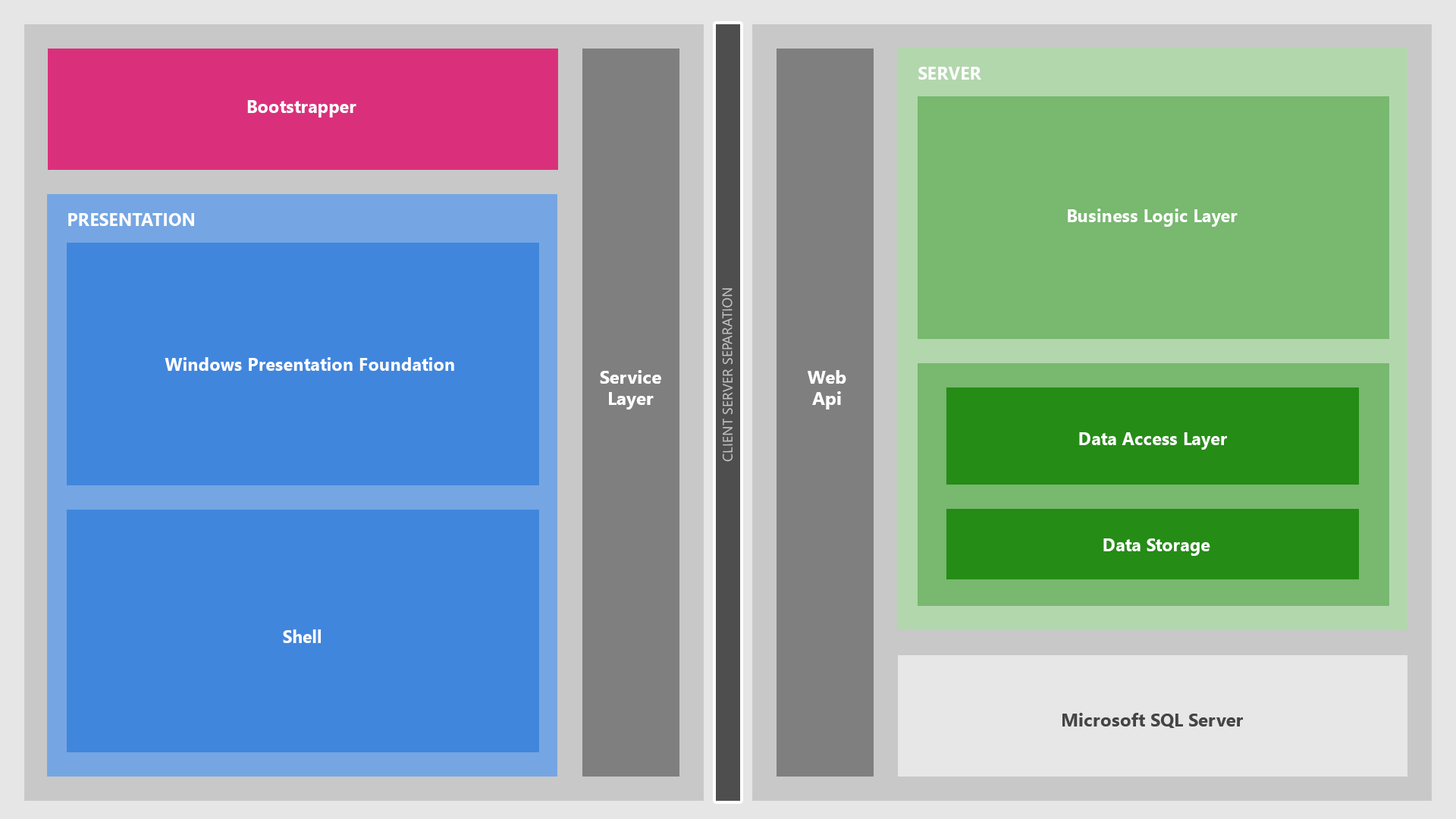
<style>
.page{position:relative;width:1456px;height:819px}
.page>*{position:absolute;margin:0}
.t1{font:18.2px "SegoeUI-Bold";color:#ffffff;text-transform:uppercase;scale:0.97 1}
.t2{font:18.2px "SegoeUI-Bold";color:#ffffff;scale:0.97 1}
.t3{font:13.6px "SegoeUI";color:#c1c1c1;text-transform:uppercase}
.t4{font:18.2px "SegoeUI-Bold";color:#ffffff}
.t5{font:18.2px "SegoeUI-Bold";color:#454545}
</style>
<div class="page">
<p class="t1" style="left:918px;top:67px;width:63px;height:13px">SERVER</p>
<p class="t2" style="left:247px;top:100px;width:109px;height:18px">Bootstrapper</p>
<p class="t2" style="left:1068px;top:209px;width:170px;height:18px">Business Logic Layer</p>
<p class="t1" style="left:68px;top:213px;width:126px;height:13px">Presentation</p>
<p class="t3" style="left:722px;top:288px;width:11px;height:174px;rotate:-90deg">CLIENT SERVER SEPARATION</p>
<p class="t2" style="left:165px;top:357px;width:289px;height:14px">Windows Presentation Foundation</p>
<p class="t4" style="left:600px;top:370px;width:61px;height:39px;text-align:center">Service<br>Layer</p>
<p class="t4" style="left:808px;top:370px;width:38px;height:39px;text-align:center">Web<br>Api</p>
<p class="t2" style="left:1079px;top:432px;width:148px;height:18px">Data Access Layer</p>
<p class="t2" style="left:1103px;top:538px;width:107px;height:18px">Data Storage</p>
<p class="t2" style="left:283px;top:629px;width:38px;height:14px">Shell</p>
<p class="t5" style="left:1062px;top:713px;width:181px;height:15px">Microsoft SQL Server</p>
</div>
